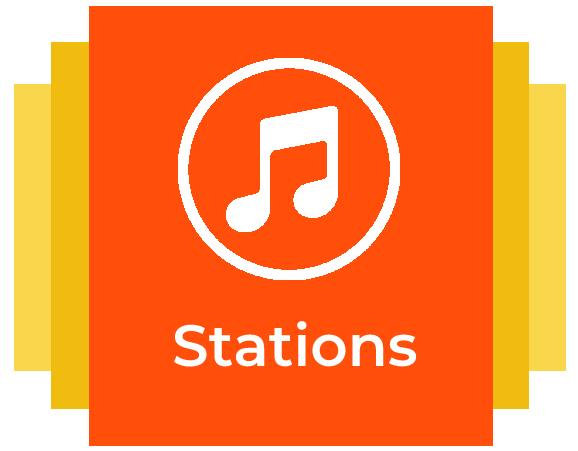
<style>
.page{position:relative;width:578px;height:451px;background:#ff4f0a}
.page>*{position:absolute;margin:0}
.t1{font:58.2px "Montserrat-SemiBold";color:#ffffff}
</style>
<div class="page">
<p class="t1" style="left:174px;top:321px;width:243px;height:46px">Stations</p>
</div>
